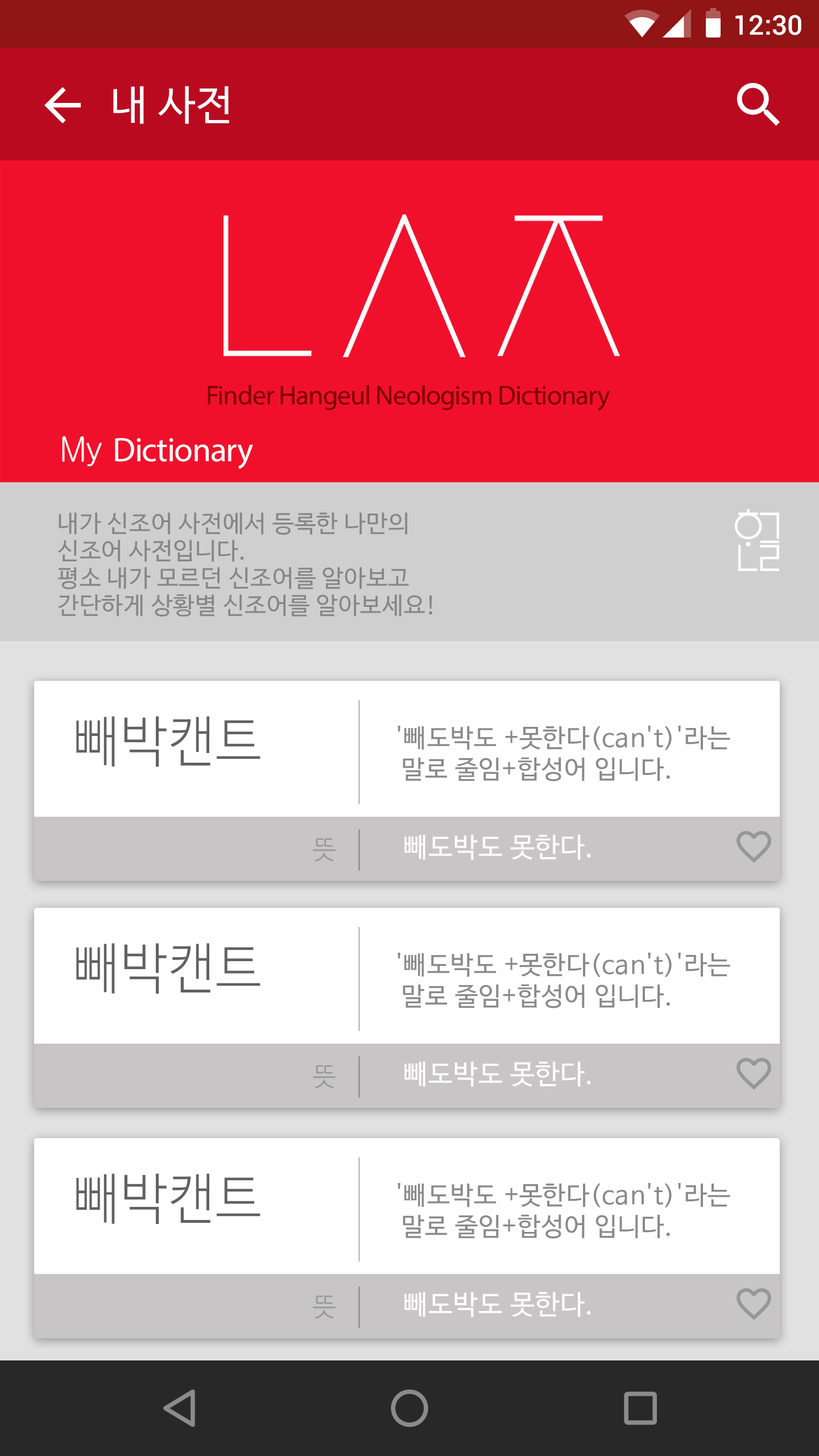
<style>
.page{position:relative;width:819px;height:1456px;background:#ffffff}
.page>*{position:absolute;margin:0}
.t1{font:27.3px "Roboto-Medium";color:#ffffff}
.t2{font:40.9px "NanumBarunGothic";letter-spacing:0.025em;color:#ffffff}
.t3{font:27.3px "MyriadPro-Regular";letter-spacing:-0.025em;color:#790101}
.t4{font:34.1px "MyriadPro-Regular";letter-spacing:-0.025em;color:#ffffff}
.t5{font:34.1px "Gulim";letter-spacing:-0.025em;color:#ffffff}
.t6{font:23.9px/27.3px "NanumBarunGothic";letter-spacing:0.025em;color:#878686}
.t7{font:55.1px "NanumBarunGothicLight";letter-spacing:0.025em;color:#616161;scale:0.94 1}
.t8{font:25.6px/31.3px "NanumBarunGothic";letter-spacing:0.025em;color:#898989}
.t9{font:25.5px "NanumGothic";letter-spacing:-0.025em;color:#95979a}
.t10{font:27.3px "NanumBarunGothic";letter-spacing:0.025em;color:#ffffff}
</style>
<div class="page">
<p class="t1" style="left:735px;top:15px;width:66px;height:20px">12:30</p>
<p class="t2" style="left:113px;top:86px;width:116px;height:38px">내 사전</p>
<p class="t3" style="left:208px;top:385px;width:402px;height:26px">Finder Hangeul Neologism Dictionary</p>
<p class="t4" style="left:62px;top:436px;width:191px;height:33px"><span class="t5">My </span>Dictionary</p>
<p class="t6" style="left:57px;top:512px;width:375px;height:105px">내가 신조어 사전에서 등록한 나만의<br>신조어 사전입니다.<br>평소 내가 모르던 신조어를 알아보고 <br>간단하게 상황별 신조어를 알아보세요!</p>
<p class="t7" style="left:76px;top:716px;width:184px;height:51px">빼박캔트</p>
<p class="t8" style="left:398px;top:726px;width:332px;height:55px">'빼도박도 +못한다(can't)'라는 <br> 말로 줄임+합성어 입니다.</p>
<p class="t9" style="left:313px;top:838px;width:23px;height:24px">뜻</p>
<p class="t10" style="left:404px;top:834px;width:187px;height:26px">빼도박도 못한다.</p>
<p class="t7" style="left:76px;top:943px;width:184px;height:51px">빼박캔트</p>
<p class="t8" style="left:398px;top:953px;width:332px;height:55px">'빼도박도 +못한다(can't)'라는 <br> 말로 줄임+합성어 입니다.</p>
<p class="t10" style="left:404px;top:1061px;width:187px;height:26px">빼도박도 못한다.</p>
<p class="t9" style="left:313px;top:1065px;width:23px;height:24px">뜻</p>
<p class="t7" style="left:76px;top:1173px;width:184px;height:51px">빼박캔트</p>
<p class="t8" style="left:398px;top:1183px;width:332px;height:56px">'빼도박도 +못한다(can't)'라는 <br> 말로 줄임+합성어 입니다.</p>
<p class="t9" style="left:313px;top:1296px;width:23px;height:23px">뜻</p>
<p class="t10" style="left:404px;top:1292px;width:187px;height:25px">빼도박도 못한다.</p>
</div>
